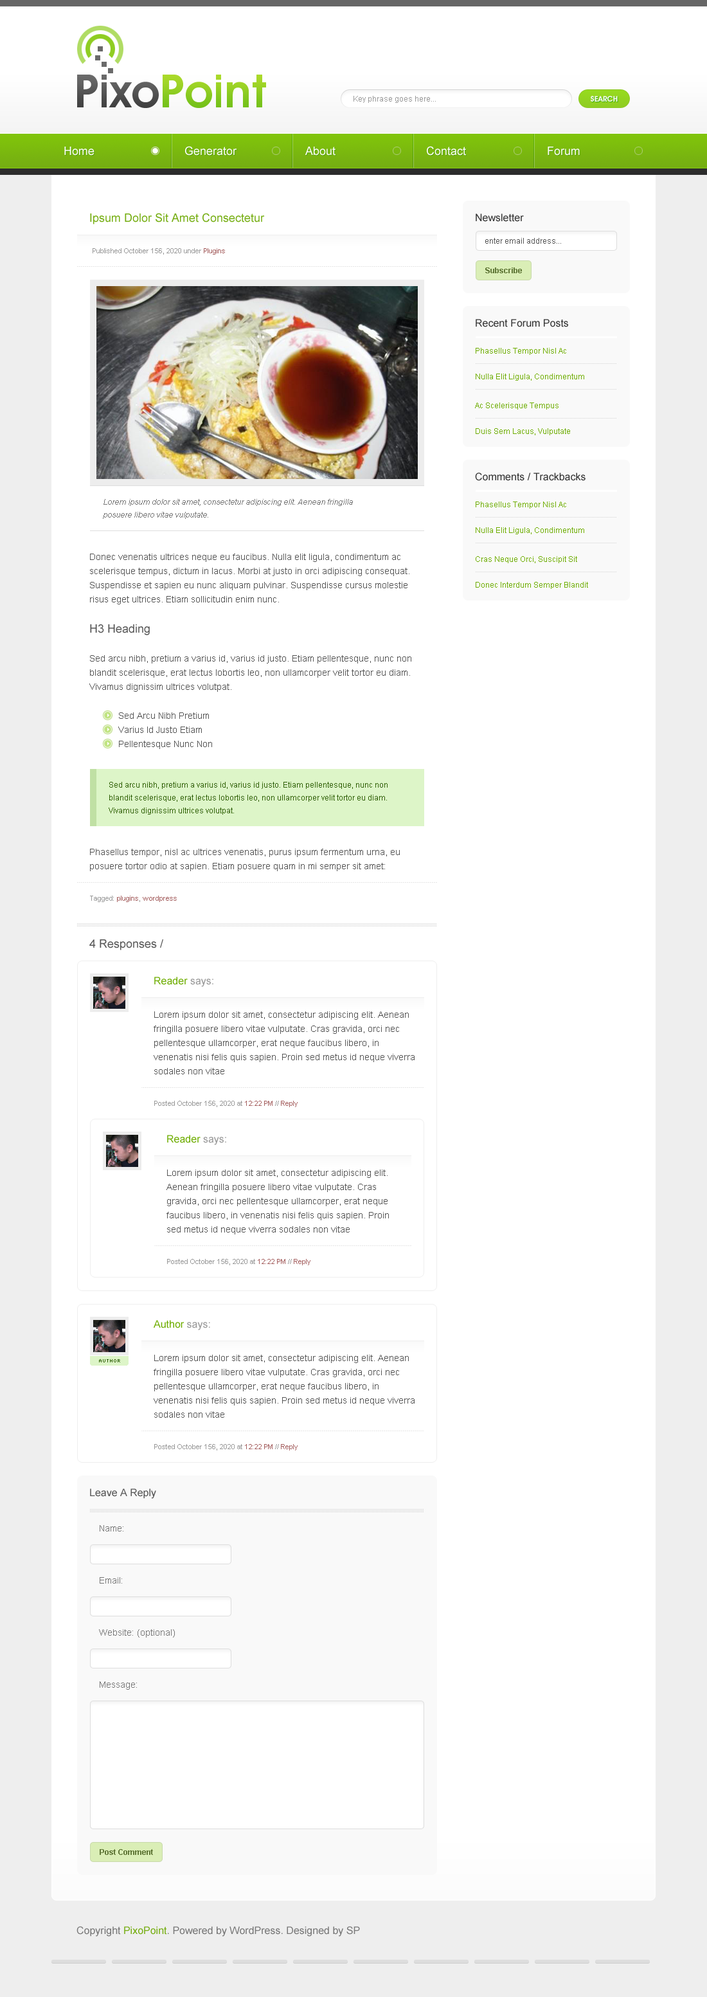
<style>
.page{position:relative;width:707px;height:1997px;background:#ffffff}
.page>*{position:absolute;margin:0}
.t1{font:7.7px "ArialMT";color:#999999}
.t2{font:7.7px "AvantGardeITCbyBT-Demi";color:#f9f9f9;text-transform:uppercase}
.t3{font:11.6px "ArialMT";color:#ffffff}
.t4{font:11.6px "ArialMT";color:#74ad10}
.t5{font:7.1px "ArialMT";color:#999999}
.t6{font:7.1px "ArialMT";color:#a56060}
.t7{font:7.7px/12.9px "Arial-ItalicMT";color:#777777}
.t8{font:9px/14.1px "ArialMT";color:#555555}
.t9{font:11.6px "ArialMT";color:#555555}
.t10{font:7.7px/12.9px "ArialMT";color:#306106}
.t11{font:10.3px "ArialMT";color:#6ead00}
.t12{font:10.3px "ArialMT";color:#999999}
.t13{font:5.1px "Silkscreen";color:#306106}
.t14{font:10.3px "ArialMT";color:#555555}
.t15{font:9px "ArialMT";color:#777777}
.t16{font:7.7px "Arial-BoldMT";color:#627939}
.t17{font:10.3px "ArialMT";color:#777777}
.t18{font:10.3px "ArialMT";color:#74ad10}
</style>
<div class="page">
<p class="t1" style="left:354px;top:96px;width:82px;height:7px">Key phrase goes here...</p>
<p class="t2" style="left:591px;top:96px;width:27px;height:6px">Search</p>
<p class="t3" style="left:64px;top:147px;width:30px;height:9px">Home</p>
<p class="t3" style="left:185px;top:146px;width:52px;height:10px">Generator</p>
<p class="t3" style="left:305px;top:147px;width:31px;height:9px">About</p>
<p class="t3" style="left:427px;top:146px;width:39px;height:10px">Contact</p>
<p class="t3" style="left:548px;top:147px;width:32px;height:9px">Forum</p>
<p class="t4" style="left:90px;top:213px;width:175px;height:11px">Ipsum Dolor Sit Amet Consectetur</p>
<p class="t5" style="left:93px;top:248px;width:132px;height:7px">Published October 156, 2020 under <span class="t6">Plugins</span></p>
<p class="t7" style="left:103px;top:499px;width:250px;height:20px">Lorem ipsum dolor sit amet, consectetur adipiscing elit. Aenean fringilla<br>posuere libero vitae vulputate.</p>
<p class="t8" style="left:90px;top:554px;width:320px;height:50px">Donec venenatis ultrices neque eu faucibus. Nulla elit ligula, condimentum ac<br>scelerisque tempus, dictum in lacus. Morbi at justo in orci adipiscing consequat.<br>Suspendisse et sapien eu nunc aliquam pulvinar. Suspendisse cursus molestie<br>risus eget ultrices. Etiam sollicitudin enim nunc.</p>
<p class="t9" style="left:90px;top:624px;width:60px;height:11px">H3 Heading</p>
<p class="t8" style="left:89px;top:655px;width:322px;height:37px">Sed arcu nibh, pretium a varius id, varius id justo. Etiam pellentesque, nunc non<br>blandit scelerisque, erat lectus lobortis leo, non ullamcorper velit tortor eu diam.<br>Vivamus dignissim ultrices volutpat.</p>
<p class="t8" style="left:118px;top:712px;width:94px;height:37px">Sed Arcu Nibh Pretium<br>Varius Id Justo Etiam<br>Pellentesque Nunc Non</p>
<p class="t10" style="left:109px;top:782px;width:279px;height:33px">Sed arcu nibh, pretium a varius id, varius id justo. Etiam pellentesque, nunc non<br>blandit scelerisque, erat lectus lobortis leo, non ullamcorper velit tortor eu diam.<br>Vivamus dignissim ultrices volutpat.</p>
<p class="t8" style="left:90px;top:849px;width:310px;height:22px">Phasellus tempor, nisl ac ultrices venenatis, purus ipsum fermentum urna, eu<br>posuere tortor odio at sapien. Etiam posuere quam in mi semper sit amet:</p>
<p class="t6" style="left:90px;top:896px;width:87px;height:6px"><span class="t5">Tagged: </span>plugins<span class="t5">,</span> wordpress</p>
<p class="t9" style="left:89px;top:939px;width:74px;height:11px">4 Responses /</p>
<p class="t11" style="left:154px;top:977px;width:59px;height:10px">Reader <span class="t12">says:</span></p>
<p class="t8" style="left:154px;top:1011px;width:261px;height:63px">Lorem ipsum dolor sit amet, consectetur adipiscing elit. Aenean<br>fringilla posuere libero vitae vulputate. Cras gravida, orci nec<br>pellentesque ullamcorper, erat neque faucibus libero, in<br>venenatis nisi felis quis sapien. Proin sed metus id neque viverra<br>sodales non vitae</p>
<p class="t5" style="left:154px;top:1101px;width:144px;height:6px">Posted October 156, 2020 at <span class="t6">12:22 PM</span> // <span class="t6">Reply</span></p>
<p class="t11" style="left:167px;top:1135px;width:59px;height:10px">Reader <span class="t12">says:</span></p>
<p class="t8" style="left:166px;top:1169px;width:223px;height:65px">Lorem ipsum dolor sit amet, consectetur adipiscing elit.<br>Aenean fringilla posuere libero vitae vulputate. Cras<br>gravida, orci nec pellentesque ullamcorper, erat neque<br>faucibus libero, in venenatis nisi felis quis sapien. Proin<br>sed metus id neque viverra sodales non vitae</p>
<p class="t5" style="left:167px;top:1259px;width:143px;height:6px">Posted October 156, 2020 at <span class="t6">12:22 PM</span> // <span class="t6">Reply</span></p>
<p class="t11" style="left:154px;top:1320px;width:56px;height:10px">Author <span class="t12">says:</span></p>
<p class="t13" style="left:99px;top:1359px;width:21px;height:3px">Author</p>
<p class="t8" style="left:154px;top:1354px;width:261px;height:64px">Lorem ipsum dolor sit amet, consectetur adipiscing elit. Aenean<br>fringilla posuere libero vitae vulputate. Cras gravida, orci nec<br>pellentesque ullamcorper, erat neque faucibus libero, in<br>venenatis nisi felis quis sapien. Proin sed metus id neque viverra<br>sodales non vitae</p>
<p class="t5" style="left:154px;top:1444px;width:144px;height:6px">Posted October 156, 2020 at <span class="t6">12:22 PM</span> // <span class="t6">Reply</span></p>
<p class="t14" style="left:90px;top:1488px;width:66px;height:10px">Leave A Reply</p>
<p class="t15" style="left:100px;top:1525px;width:23px;height:6px">Name:</p>
<p class="t15" style="left:100px;top:1577px;width:22px;height:6px">Email:</p>
<p class="t15" style="left:99px;top:1629px;width:76px;height:8px">Website: (optional)</p>
<p class="t15" style="left:100px;top:1681px;width:37px;height:8px">Message:</p>
<p class="t16" style="left:100px;top:1849px;width:53px;height:6px">Post Comment</p>
<p class="t17" style="left:76px;top:1926px;width:284px;height:10px">Copyright <span class="t18">PixoPoint</span>. Powered by WordPress. Designed by SP</p>
</div>
